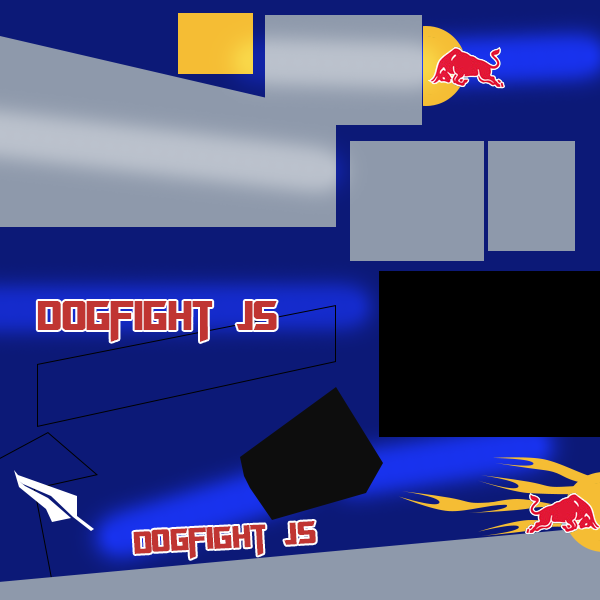
<style>
.page{position:relative;width:600px;height:600px;background:#0c1977}
.page>*{position:absolute;margin:0}
.t1{font:46.2px "TransformersMovie";color:#c03532}
.t2{font:35.1px "TransformersMovie";color:#c03532}
</style>
<div class="page">
<p class="t1" style="left:37px;top:301px;width:240px;height:41px">Dogfight JS</p>
<p class="t2" style="left:133px;top:521px;width:183px;height:38px;rotate:-3deg">Dogfight JS</p>
</div>
